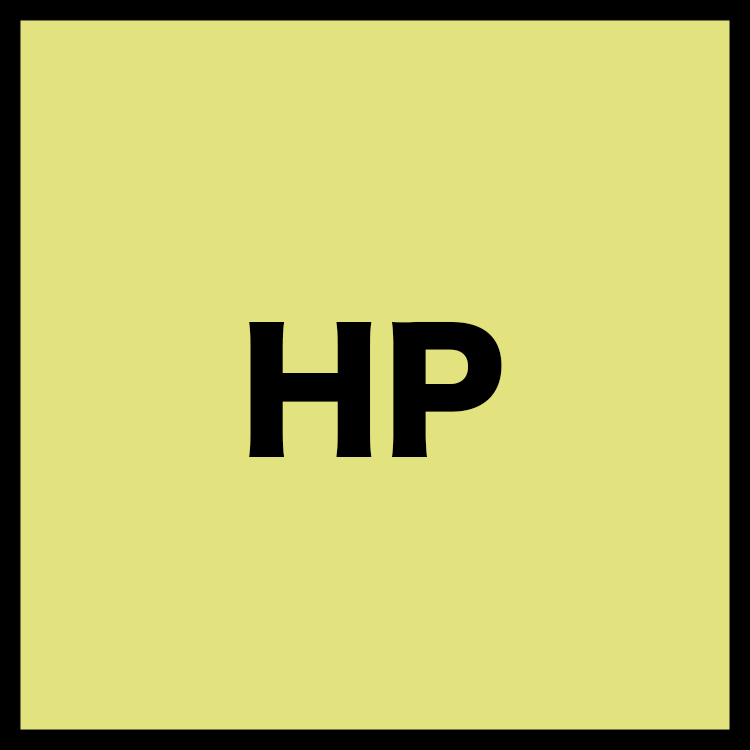
<style>
.page{position:relative;width:750px;height:750px;background:#e2e37e}
.page>*{position:absolute;margin:0}
.t1{font:162.8px "HiraKakuStdN-W8";color:#000000}
</style>
<div class="page">
<p class="t1" style="left:249px;top:321px;width:253px;height:136px">HP</p>
</div>
